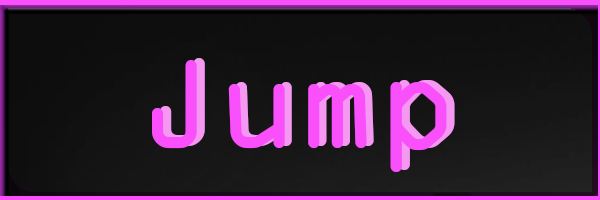
<style>
.page{position:relative;width:600px;height:200px}
.page>*{position:absolute;margin:0}
.t1{font:134.7px "OCRAExtended";color:#f950fb}
.t2{font:134.7px "OCRAExtended"}
</style>
<div class="page">
<p class="t1" style="left:152px;top:60px;width:295px;height:112px">Jump</p>
<p class="t2" style="left:160px;top:58px;width:295px;height:112px">Jump</p>
</div>
